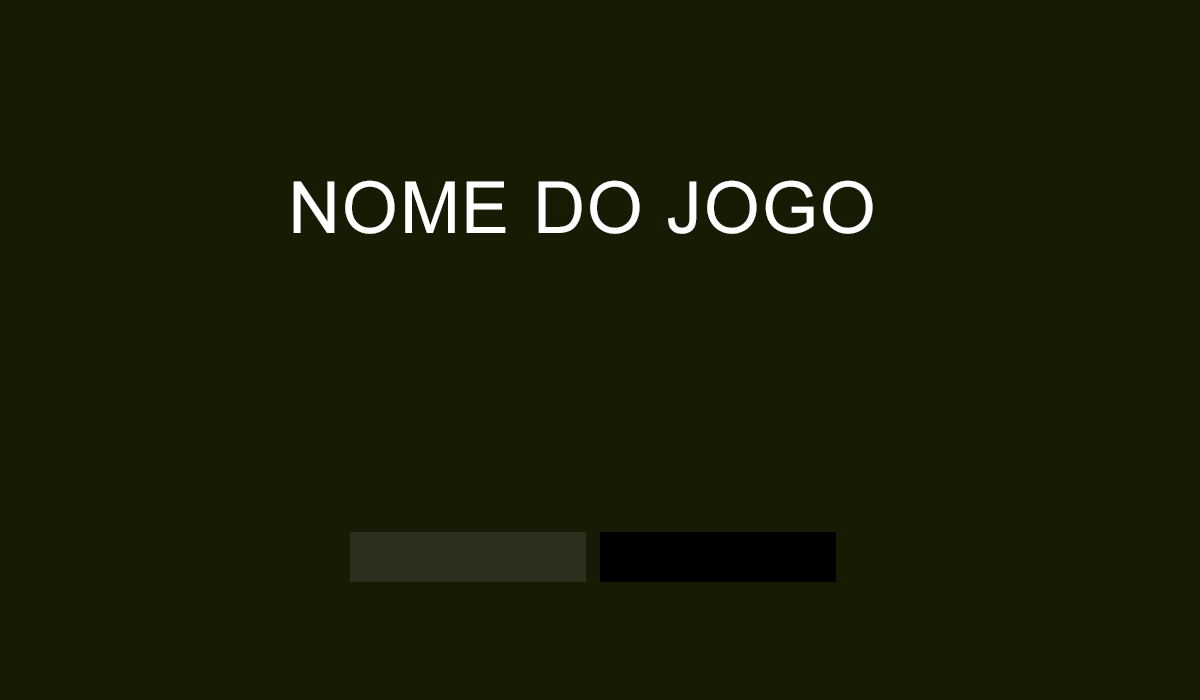
<style>
.page{position:relative;width:1200px;height:700px;background:#161c04}
.page>*{position:absolute;margin:0}
.t1{font:72px "ArialMT";letter-spacing:0.025em;color:#ffffff}
</style>
<div class="page">
<p class="t1" style="left:293px;top:180px;width:580px;height:54px">NOME DO JOGO</p>
</div>
